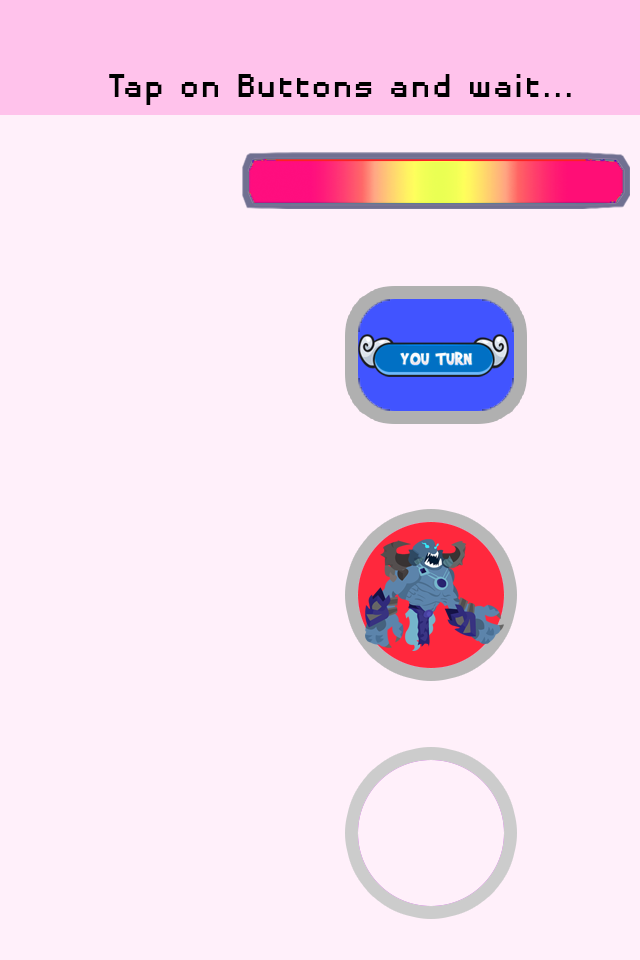
<style>
.page{position:relative;width:640px;height:960px;background:#fff0fa}
.page>*{position:absolute;margin:0}
.t1{font:43px "DisposableDroidBB";color:#000000}
</style>
<div class="page">
<p class="t1" style="left:109px;top:74px;width:462px;height:31px">Tap on Buttons and wait...</p>
</div>
